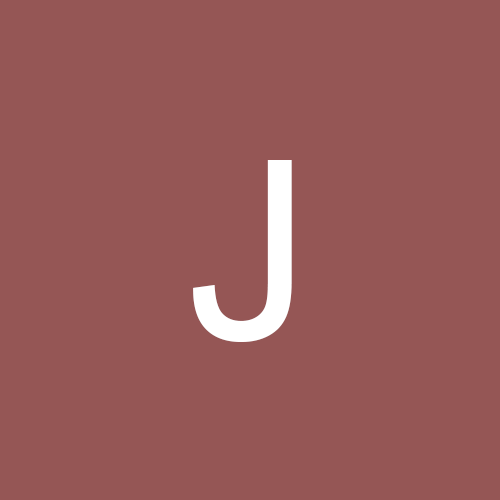
<style>
.page{position:relative;width:500px;height:500px;background:#955655}
.page>*{position:absolute;margin:0}
.t1{font:250px "ArialMT";color:#ffffff}
</style>
<div class="page">
<p class="t1" style="left:193px;top:160px;width:99px;height:182px">J</p>
</div>
